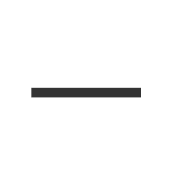
<style>
.page{position:relative;width:169px;height:169px;background:#ffffff}
.page>*{position:absolute;margin:0}
.t1{font:150px "KozGoPr6N-Regular";color:#333333;text-transform:uppercase}
</style>
<div class="page">
<p class="t1" style="left:31px;top:87px;width:110px;height:11px">−</p>
</div>
